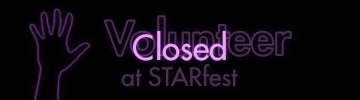
<style>
.page{position:relative;width:360px;height:100px;background:#000000}
.page>*{position:absolute;margin:0}
.t1{font:45.8px "FuturaStd-Heavy"}
.t2{font:33.3px "FuturaStd-Medium";color:#e7a9e5}
.t3{font:25px "FuturaStd-Medium";color:#463345}
</style>
<div class="page">
<p class="t1" style="left:104px;top:16px;width:187px;height:40px">Volunteer</p>
<p class="t2" style="left:133px;top:31px;width:93px;height:30px">Closed</p>
<p class="t3" style="left:121px;top:64px;width:117px;height:23px">at STARfest</p>
</div>
